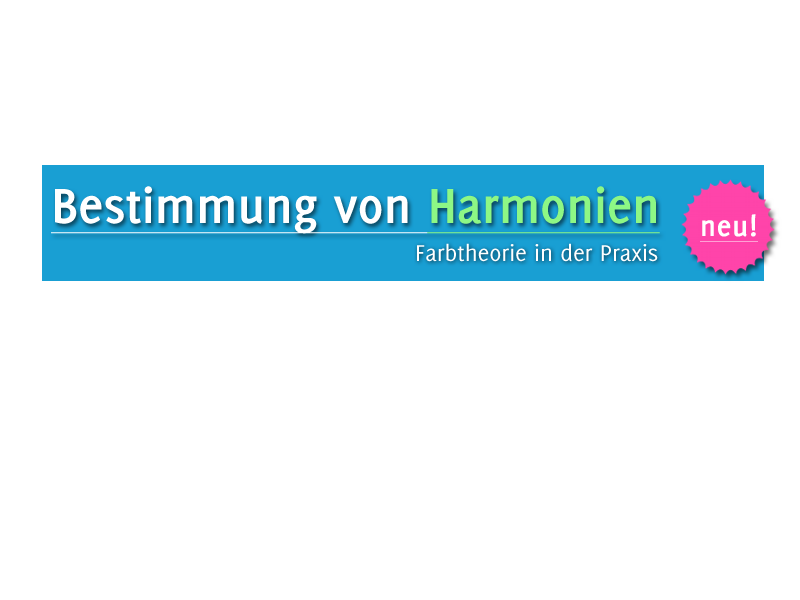
<style>
.page{position:relative;width:800px;height:600px;background:#ffffff}
.page>*{position:absolute;margin:0}
.t1{font:54px "Delicious-Bold";letter-spacing:-0.004em;color:#ffffff;text-decoration:underline}
.t2{font:54px "Delicious-Bold";letter-spacing:-0.004em;color:#8df785;text-decoration:underline}
.t3{font:31px "Delicious-Bold";letter-spacing:-0.004em;color:#ffffff;font-weight:bold;text-decoration:underline}
.t4{font:25px "Delicious-Roman";letter-spacing:-0.004em;color:#ffffff}
</style>
<div class="page">
<p class="t1" style="left:51px;top:186px;width:609px;height:48px">Bestimmung von <span class="t2">Harmonien</span></p>
<p class="t3" style="left:700px;top:214px;width:58px;height:28px">neu!</p>
<p class="t4" style="left:417px;top:243px;width:241px;height:19px">Farbtheorie in der Praxis</p>
</div>
